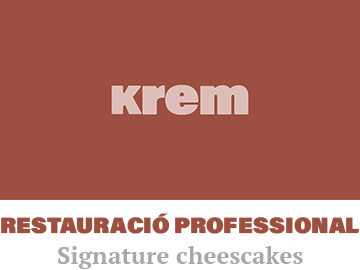
<style>
.page{position:relative;width:360px;height:270px;background:#9d5042}
.page>*{position:absolute;margin:0}
.t1{font:22.1px "AcuminConcept-UltraBlack";color:#9d5042}
.t2{font:24.2px "PTSerif-Bold";color:#a8a8a8}
</style>
<div class="page">
<p class="t1" style="left:1px;top:213px;width:358px;height:21px">RESTAURACIÓ PROFESSIONAL</p>
<p class="t2" style="left:58px;top:246px;width:245px;height:23px">Signature cheescakes</p>
</div>
